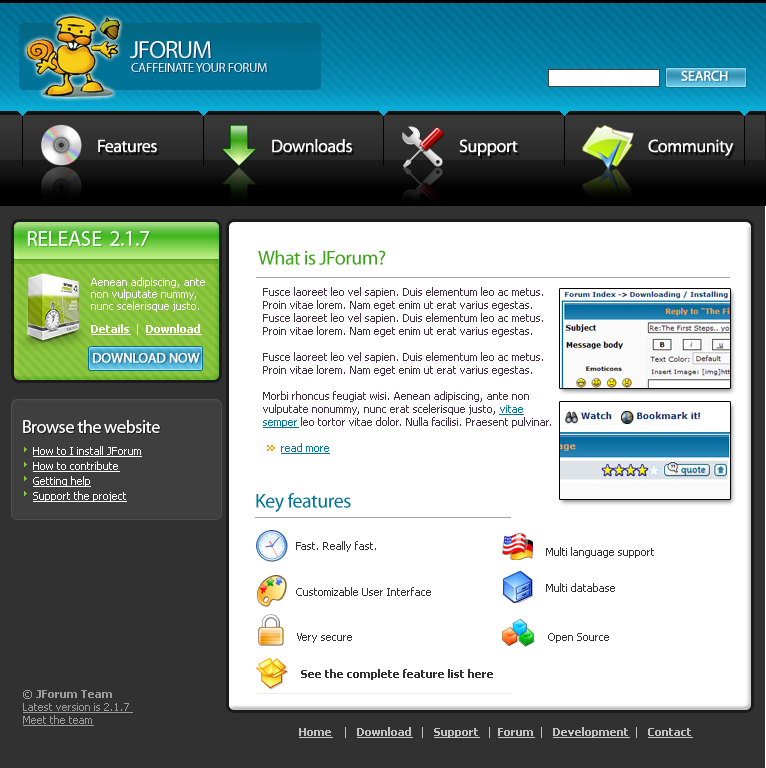
<style>
.page{position:relative;width:766px;height:768px;background:#ffffff}
.page>*{position:absolute;margin:0}
.t1{font:25px "Myriad-Roman";letter-spacing:-0.05em;color:#ffffff;text-transform:uppercase}
.t2{font:13px "Myriad-Roman";letter-spacing:-0.025em;color:#ffffff;text-transform:uppercase}
.t3{font:14px "Myriad-Roman";letter-spacing:-0.025em;color:#ffffff;text-transform:uppercase;font-weight:bold}
.t4{font:18px "Myriad-Roman";letter-spacing:-0.025em;color:#ffffff}
.t5{font:22px "Myriad-Roman";letter-spacing:-0.025em;color:#ffffff;text-transform:uppercase}
.t6{font:20px "Myriad-Roman";letter-spacing:-0.025em;color:#3aa315}
.t7{font:11px/12px "Tahoma";color:#ffffff}
.t8{font:11px/13px "Tahoma";color:#412e41}
.t9{font:11px/13px "Tahoma";color:#007a97;text-decoration:underline}
.t10{font:11px "Tahoma-Bold";color:#ffffff;text-decoration:underline}
.t11{font:11px "Tahoma";color:#ffffff}
.t12{font:11px/15px "Tahoma";color:#ffffff;text-decoration:underline}
.t13{font:20px "Myriad-Roman";letter-spacing:-0.025em;color:#027398}
.t14{font:11px "Tahoma";color:#313131}
.t15{font:11px "Tahoma-Bold";color:#313131}
.t16{font:11px/13px "Tahoma";color:#9c9c9c;text-decoration:underline}
.t17{font:11px/13px "Tahoma";color:#9c9c9c}
.t18{font:11px/13px "Tahoma-Bold";color:#9c9c9c}
.t19{font:11px "Tahoma-Bold";color:#c2c2c2;text-decoration:underline}
.t20{font:11px "Tahoma";color:#c2c2c2}
</style>
<div class="page">
<p class="t1" style="left:130px;top:41px;width:81px;height:18px">jforum</p>
<p class="t2" style="left:131px;top:63px;width:136px;height:9px">Caffeinate your forum</p>
<p class="t3" style="left:681px;top:70px;width:47px;height:11px">search</p>
<p class="t4" style="left:98px;top:139px;width:59px;height:14px">Features</p>
<p class="t4" style="left:272px;top:139px;width:80px;height:14px">Downloads</p>
<p class="t4" style="left:459px;top:139px;width:59px;height:17px">Support</p>
<p class="t4" style="left:648px;top:139px;width:86px;height:17px">Community</p>
<p class="t5" style="left:27px;top:231px;width:123px;height:15px">RElease  2.1.7</p>
<p class="t6" style="left:258px;top:250px;width:128px;height:15px">What is JForum?</p>
<p class="t7" style="left:91px;top:277px;width:114px;height:35px">Aenean adipiscing, ante non vulputate nummy, nunc scelerisque justo.</p>
<p class="t8" style="left:263px;top:287px;width:288px;height:167px">Fusce laoreet leo vel sapien. Duis elementum leo ac metus. Proin vitae lorem. Nam eget enim ut erat varius egestas. <br>Fusce laoreet leo vel sapien. Duis elementum leo ac metus. Proin vitae lorem. Nam eget enim ut erat varius egestas. <br><br>Fusce laoreet leo vel sapien. Duis elementum leo ac metus. Proin vitae lorem. Nam eget enim ut erat varius egestas. <br><br>Morbi rhoncus feugiat wisi. Aenean adipiscing, ante non vulputate nonummy, nunc erat scelerisque justo, <span class="t9">vitae semper </span>leo tortor vitae dolor. Nulla facilisi. Praesent pulvinar. <br><br>      <span class="t9">read more</span></p>
<p class="t10" style="left:91px;top:324px;width:111px;height:11px">Details  <span class="t11">|  </span>Download</p>
<p class="t3" style="left:93px;top:353px;width:107px;height:10px">Download now</p>
<p class="t4" style="left:23px;top:420px;width:137px;height:13px">Browse the website</p>
<p class="t12" style="left:33px;top:446px;width:109px;height:56px">How to I install JForum<br>How to contribute<br>Getting help<br>Support the project</p>
<p class="t13" style="left:256px;top:493px;width:95px;height:19px">Key features</p>
<p class="t14" style="left:296px;top:541px;width:80px;height:11px">Fast. Really fast.</p>
<p class="t14" style="left:546px;top:547px;width:108px;height:11px">Multi language support</p>
<p class="t14" style="left:296px;top:587px;width:135px;height:9px">Customizable User Interface</p>
<p class="t14" style="left:546px;top:583px;width:69px;height:9px">Multi database</p>
<p class="t14" style="left:297px;top:633px;width:55px;height:10px">Very secure</p>
<p class="t14" style="left:548px;top:633px;width:61px;height:10px">Open Source</p>
<p class="t15" style="left:301px;top:669px;width:192px;height:11px">See the complete feature list here</p>
<p class="t16" style="left:23px;top:690px;width:110px;height:36px"><span class="t17">© </span><span class="t18">JForum Team<br></span>Latest version is 2.1.7 <br>Meet the team</p>
<p class="t19" style="left:299px;top:727px;width:394px;height:11px">Home<span class="t20">    |   </span>Download<span class="t20">   |   </span>Support<span class="t20">   |  </span>Forum<span class="t20">  |   </span>Development<span class="t20">  |   </span>Contact</p>
</div>
